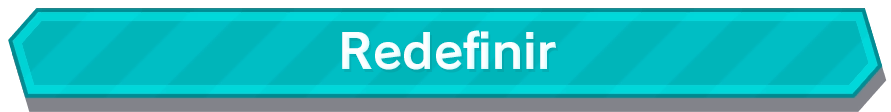
<style>
.page{position:relative;width:891px;height:112px;background:#00bec4}
.page>*{position:absolute;margin:0}
.t1{font:48px "RodinPro-B";color:#fffeff}
</style>
<div class="page">
<p class="t1" style="left:342px;top:30px;width:214px;height:40px">Redefinir</p>
</div>
